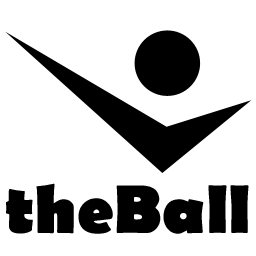
<style>
.page{position:relative;width:256px;height:256px;background:#ffffff}
.page>*{position:absolute;margin:0}
.t1{font:69.3px "BerlinSansFB-Bold";color:#000000}
</style>
<div class="page">
<p class="t1" style="left:6px;top:183px;width:243px;height:51px">theBall</p>
</div>
